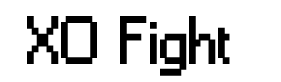
<style>
.page{position:relative;width:281px;height:82px;background:#ffffff}
.page>*{position:absolute;margin:0}
.t1{font:62.5px "Small Fonts";color:#000000;font-weight:bold}
</style>
<div class="page">
<p class="t1" style="left:27px;top:16px;width:203px;height:60px">XO  Fight</p>
</div>
